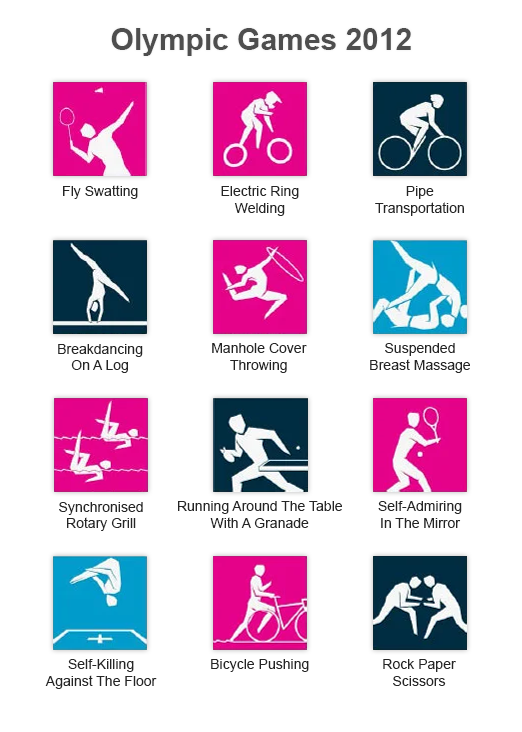
<style>
.page{position:relative;width:522px;height:732px;background:#ffffff}
.page>*{position:absolute;margin:0}
.t1{font:30px "Arial-BoldMT";color:#4e4e4e}
.t2{font:14px "ArialMT";color:#252525}
</style>
<div class="page">
<p class="t1" style="left:111px;top:28px;width:300px;height:28px">Olympic Games 2012</p>
<p class="t2" style="left:63px;top:185px;width:75px;height:14px">Fly Swatting</p>
<p class="t2" style="left:221px;top:185px;width:78px;height:31px;text-align:center">Electric Ring<br>Welding</p>
<p class="t2" style="left:375px;top:186px;width:89px;height:30px;text-align:center">Pipe<br>Transportation</p>
<p class="t2" style="left:58px;top:344px;width:85px;height:29px;text-align:center">Breakdancing<br>On A Log</p>
<p class="t2" style="left:212px;top:343px;width:95px;height:30px;text-align:center">Manhole Cover<br>Throwing</p>
<p class="t2" style="left:370px;top:343px;width:100px;height:30px;text-align:center">Suspended<br>Breast Massage</p>
<p class="t2" style="left:59px;top:502px;width:84px;height:29px;text-align:center">Synchronised<br>Rotary Grill</p>
<p class="t2" style="left:178px;top:501px;width:164px;height:27px;text-align:center">Running Around The Table<br>With A Granade</p>
<p class="t2" style="left:378px;top:501px;width:84px;height:27px;text-align:center">Self-Admiring<br>In The Mirror</p>
<p class="t2" style="left:45px;top:659px;width:112px;height:30px;text-align:center">Self-Killing<br>Against The Floor</p>
<p class="t2" style="left:211px;top:659px;width:98px;height:13px">Bicycle Pushing</p>
<p class="t2" style="left:383px;top:659px;width:73px;height:27px;text-align:center">Rock Paper<br>Scissors</p>
</div>
